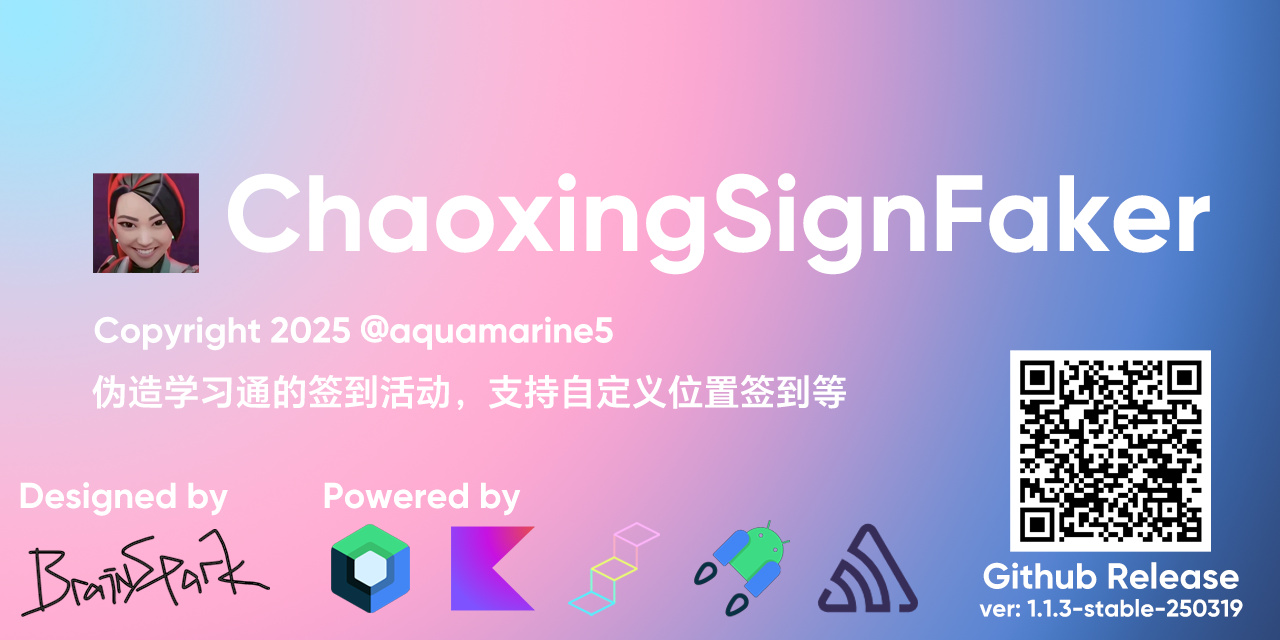
<style>
.page{position:relative;width:1280px;height:640px}
.page>*{position:absolute;margin:0}
.t1{font:108px "Gilroy-Bold";color:#ffffff}
.t2{font:36px "Gilroy-Bold";color:#ffffff}
.t3{font:36px "HONORSansCN-Bold";color:#ffffff}
.t4{font:36px "HONORSansCN-DemiBold";color:#ffffff}
.t5{font:24px "Gilroy-Bold";color:#ffffff}
</style>
<div class="page">
<p class="t1" style="left:228px;top:173px;width:982px;height:102px">ChaoxingSignFaker</p>
<p class="t2" style="left:94px;top:315px;width:519px;height:36px">Copyright 2025 <span class="t3">@</span>aquamarine5</p>
<p class="t4" style="left:92px;top:374px;width:754px;height:37px">伪造学习通的签到活动，支持自定义位置签到等</p>
<p class="t2" style="left:20px;top:482px;width:208px;height:34px">Designed by</p>
<p class="t2" style="left:324px;top:482px;width:197px;height:34px">Powered by</p>
<p class="t2" style="left:983px;top:562px;width:256px;height:27px">Github Release</p>
<p class="t5" style="left:979px;top:599px;width:264px;height:18px">ver: 1.1.3-stable-250319</p>
</div>
